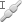
<style>
.page{position:relative;width:22px;height:22px;background:#ffffff}
.page>*{position:absolute;margin:0}
.t1{font:12.5px "SimSun";color:#6f6f6f}
</style>
<div class="page">
<p class="t1" style="left:0px;top:1px;width:5px;height:8px">I</p>
</div>
